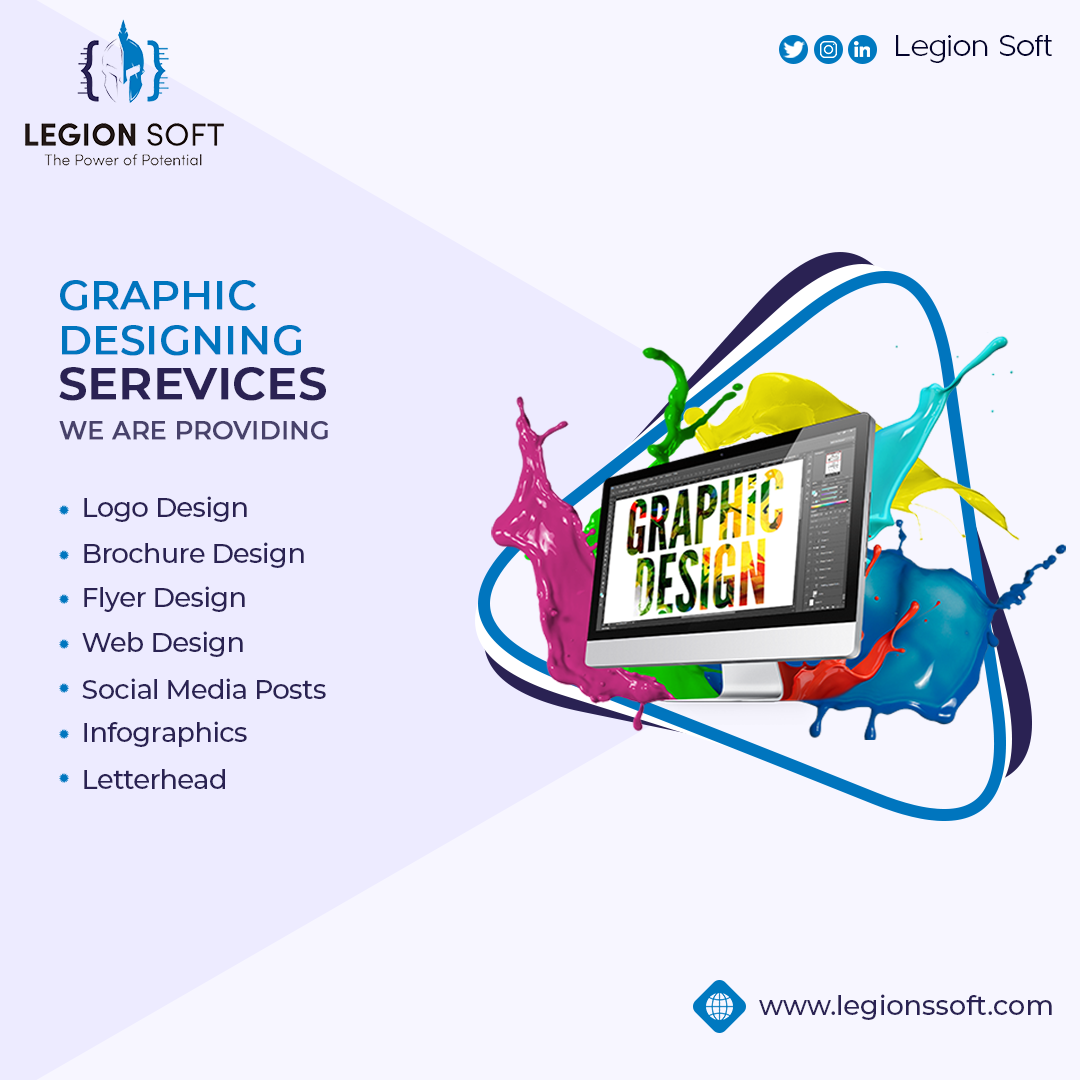
<style>
.page{position:relative;width:1080px;height:1080px;background:#f7f6ff}
.page>*{position:absolute;margin:0}
.t1{font:31.1px "Metrisch-Book";letter-spacing:-0.015em;color:#04042d}
.t2{font:40px/45px "Montserrat-Medium";color:#0075be;text-transform:uppercase;font-weight:bold}
.t3{font:45px/45px "Montserrat-SemiBold";color:#2a2253;text-transform:uppercase;font-weight:bold}
.t4{font:25px "Montserrat-Medium";color:#48426b;text-transform:uppercase;font-weight:bold}
.t5{font:27px "Montserrat-Medium";letter-spacing:-0.02em;color:#2a2253}
.t6{font:27px "Montserrat-Medium";color:#2a2253}
</style>
<div class="page">
<p class="t1" style="left:896px;top:35px;width:156px;height:28px">Legion Soft</p>
<p class="t2" style="left:59px;top:280px;width:267px;height:121px">Graphic<br>Designing<br><span class="t3">Serevices</span></p>
<p class="t4" style="left:59px;top:421px;width:269px;height:19px">we are providing</p>
<p class="t5" style="left:84px;top:496px;width:163px;height:26px">Logo Design</p>
<p class="t5" style="left:84px;top:542px;width:220px;height:26px">Brochure Design</p>
<p class="t5" style="left:84px;top:586px;width:161px;height:26px">Flyer Design</p>
<p class="t5" style="left:82px;top:631px;width:161px;height:26px">Web Design</p>
<p class="t5" style="left:82px;top:678px;width:244px;height:21px">Social Media Posts</p>
<p class="t5" style="left:84px;top:721px;width:163px;height:26px">Infographics</p>
<p class="t5" style="left:84px;top:769px;width:141px;height:20px">Letterhead</p>
<p class="t6" style="left:759px;top:994px;width:293px;height:26px">www.legionssoft.com</p>
</div>
